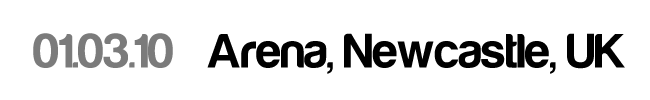
<style>
.page{position:relative;width:650px;height:100px;background:#ffffff}
.page>*{position:absolute;margin:0}
.t1{font:50px "Harabara-Bold";color:#000000}
.t2{font:50px "Harabara-Bold";color:#7b7b7b}
</style>
<div class="page">
<p class="t1" style="left:33px;top:33px;width:592px;height:41px"><span class="t2"> 01.03.10</span>   Arena, Newcastle, UK</p>
</div>
